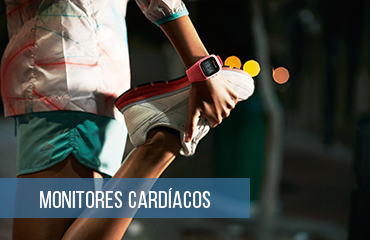
<style>
.page{position:relative;width:370px;height:240px}
.page>*{position:absolute;margin:0}
.t1{font:24px "BebasNeueRegular";letter-spacing:0.02em;color:#ffffff}
</style>
<div class="page">
<p class="t1" style="left:40px;top:188px;width:171px;height:20px">monitores cardíacos</p>
</div>
